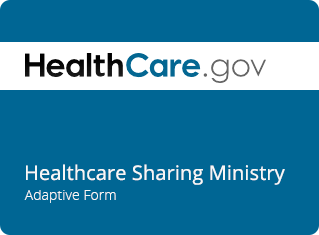
<style>
.page{position:relative;width:319px;height:235px;background:#006694}
.page>*{position:absolute;margin:0}
.t1{font:20px "OpenSans";letter-spacing:0.005em;color:#f7f7f7}
.t2{font:14px "OpenSans-Light";letter-spacing:0.005em;color:#f7f7f7}
</style>
<div class="page">
<p class="t1" style="left:26px;top:164px;width:259px;height:21px">Healthcare Sharing Ministry</p>
<p class="t2" style="left:24px;top:190px;width:92px;height:13px">Adaptive Form</p>
</div>
